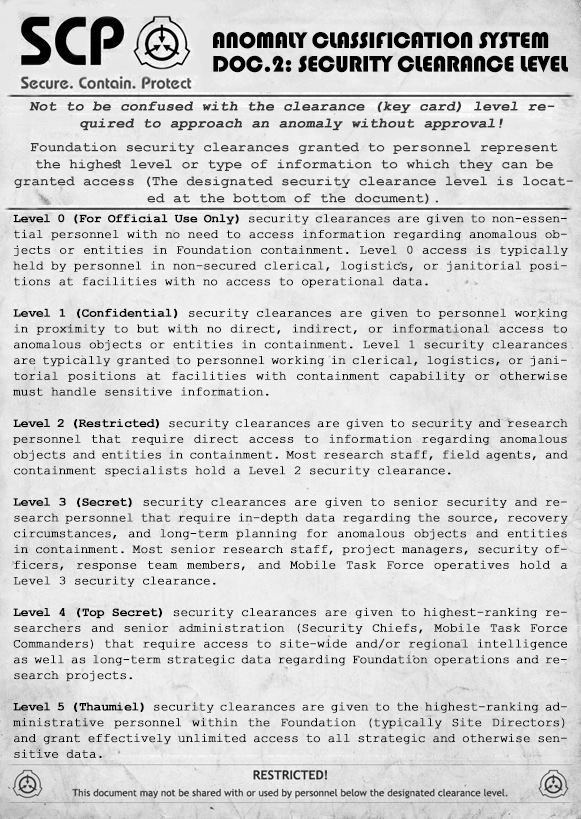
<style>
.page{position:relative;width:581px;height:819px}
.page>*{position:absolute;margin:0}
.t1{font:23.6px/23.6px "Bauhaus93";letter-spacing:-0.025em;color:#000000;text-transform:uppercase}
.t2{font:14.2px "CourierNewPS-BoldMT";letter-spacing:0.01em;color:#343434;font-weight:bold;font-style:italic}
.t3{font:14.2px "CourierNewPS-BoldMT";letter-spacing:0.01em;color:#343434}
.t4{font:12.6px/15.7px "CourierNewPSMT";letter-spacing:-0.025em;color:#000000;font-weight:bold}
.t5{font:14.2px/14.2px "CourierNewPSMT";letter-spacing:-0.025em;color:#000000;font-weight:bold}
.t6{font:12.6px/15.7px "CourierNewPS-BoldMT";letter-spacing:-0.025em;color:#000000;font-weight:bold}
</style>
<div class="page">
<p class="t1" style="left:213px;top:32px;width:355px;height:41px">Anomaly Classification System<br>Doc.2: SECURITY Clearance Level</p>
<p class="t2" style="left:29px;top:101px;width:526px;height:30px;text-align:center">Not to be confused with the clearance (key card) level required to approach an anomaly without approval!</p>
<p class="t3" style="left:14px;top:142px;width:559px;height:62px;text-align:center">Foundation security clearances granted to personnel represent the highest level or type of information to which they can be granted access (The designated security clearance level is located at the bottom of the document).</p>
<p class="t4" style="left:13px;top:214px;width:555px;height:544px;text-align:justify"><span class="t5"><br><br><br><br><br><br><br><br> <br></span><span class="t6">Level 0 (For Official Use Only)</span> security clearances are given to non-essential personnel with no need to access information regarding anomalous objects or entities in Foundation containment. Level 0 access is typically held by personnel in non-secured clerical, logistics, or janitorial positions at facilities with no access to operational data.<br> <br><span class="t6">Level 1 (Confidential)</span> security clearances are given to personnel working in proximity to but with no direct, indirect, or informational access to anomalous objects or entities in containment. Level 1 security clearances are typically granted to personnel working in clerical, logistics, or janitorial positions at facilities with containment capability or otherwise must handle sensitive information.<br><br><span class="t6">Level 2 (Restricted)</span> security clearances are given to security and research personnel that require direct access to information regarding anomalous objects and entities in containment. Most research staff, field agents, and containment specialists hold a Level 2 security clearance.<br><br><span class="t6">Level 3 (Secret) </span>security clearances are given to senior security and research personnel that require in-depth data regarding the source, recovery circumstances, and long-term planning for anomalous objects and entities in containment. Most senior research staff, project managers, security officers, response team members, and Mobile Task Force operatives hold a Level 3 security clearance.<br><br><span class="t6">Level 4 (Top Secret) </span>security clearances are given to highest-ranking researchers and senior administration (Security Chiefs, Mobile Task Force Commanders) that require access to site-wide and/or regional intelligence as well as long-term strategic data regarding Foundation operations and research projects. <br><br><span class="t6">Level 5 (Thaumiel)</span> security clearances are given to the highest-ranking administrative personnel within the Foundation (typically Site Directors) and grant effectively unlimited access to all strategic and otherwise sensitive data.</p>
</div>
